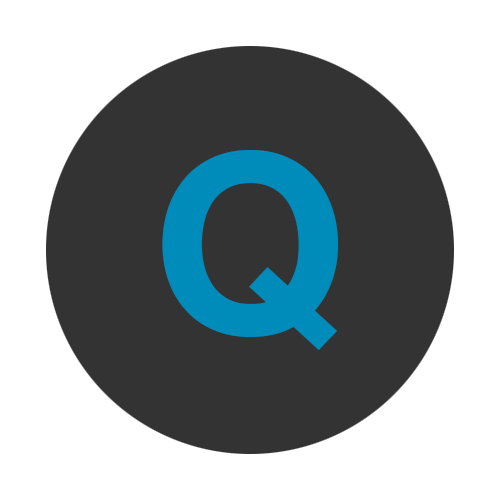
<style>
.page{position:relative;width:500px;height:500px;background:#ffffff}
.page>*{position:absolute;margin:0}
.t1{font:250px "HelveticaNeue-Bold";color:#008cba}
</style>
<div class="page">
<p class="t1" style="left:162px;top:150px;width:176px;height:200px">Q</p>
</div>
